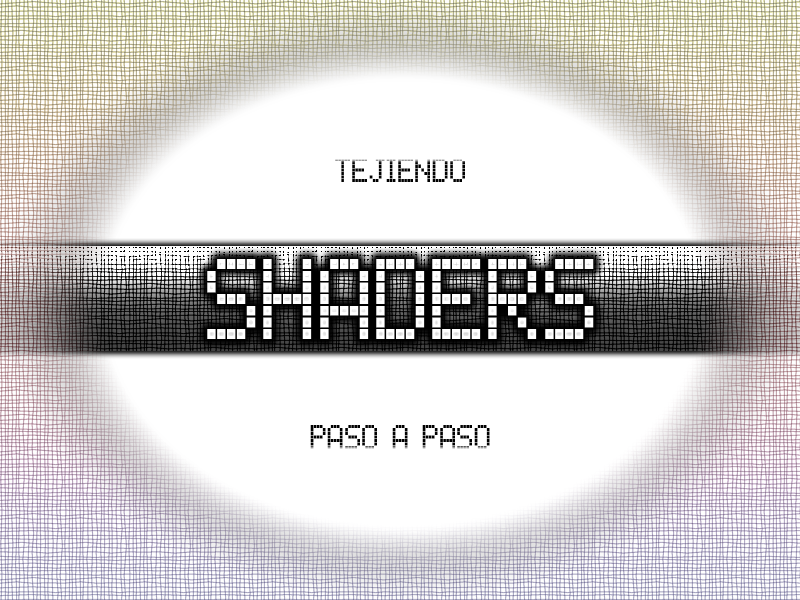
<style>
.page{position:relative;width:800px;height:600px;background:#ffffff}
.page>*{position:absolute;margin:0}
.t1{font:30.5px "Lcdphone";color:#000000;scale:0.85 1}
.t2{font:99.5px "Lcdphone";color:#ffffff;scale:0.85 1}
</style>
<div class="page">
<p class="t1" style="left:335px;top:158px;width:130px;height:24px">Tejiendo</p>
<p class="t2" style="left:207px;top:259px;width:387px;height:80px">ShaderS</p>
<p class="t1" style="left:310px;top:425px;width:180px;height:24px">PASO A PASO</p>
</div>
